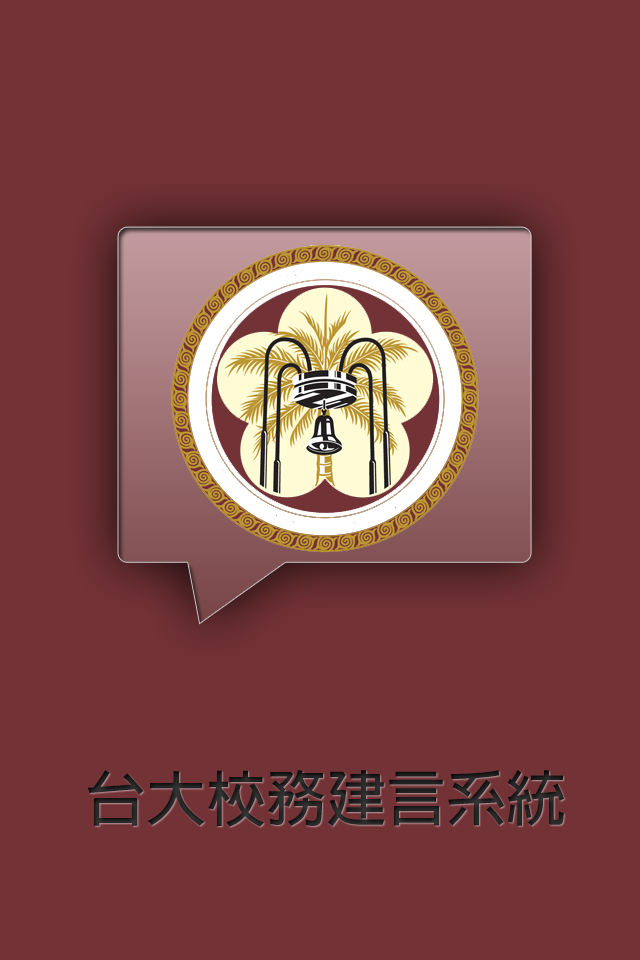
<style>
.page{position:relative;width:640px;height:960px;background:#733236}
.page>*{position:absolute;margin:0}
.t1{font:60px "AdobeFanHeitiStd-Bold";color:#222222}
</style>
<div class="page">
<p class="t1" style="left:88px;top:770px;width:476px;height:57px">台大校務建言系統</p>
</div>
